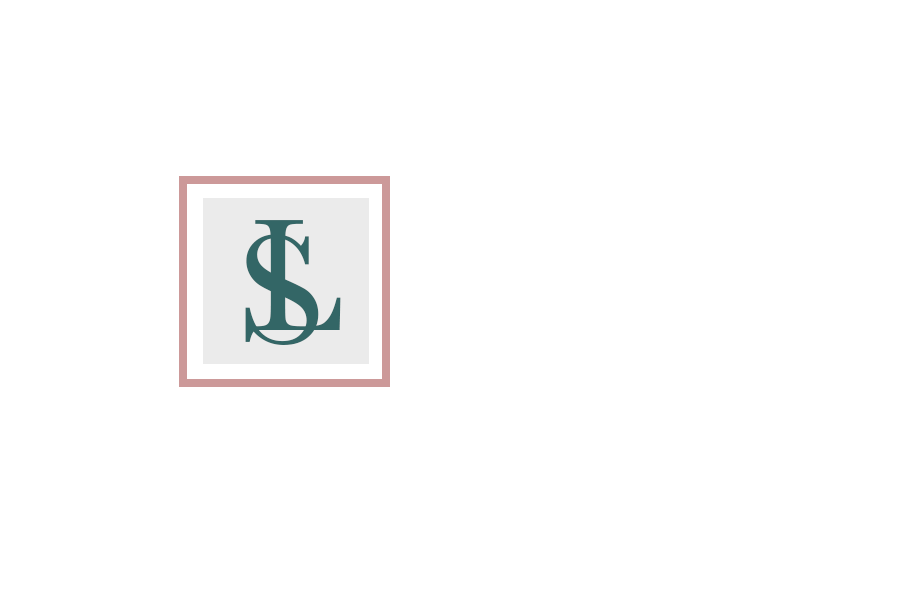
<style>
.page{position:relative;width:900px;height:600px;background:#ffffff}
.page>*{position:absolute;margin:0}
.t1{font:166.3px "Baskerville";color:#336666;text-transform:uppercase;scale:0.9 1}
.t2{font:160.7px "Baskerville";color:#336666;text-transform:uppercase;scale:1.03 1}
</style>
<div class="page">
<p class="t1" style="left:255px;top:220px;width:86px;height:110px">l</p>
<p class="t2" style="left:245px;top:234px;width:74px;height:111px">s</p>
</div>
